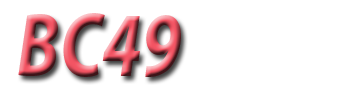
<style>
.page{position:relative;width:350px;height:100px;background:#ffffff}
.page>*{position:absolute;margin:0}
.t1{font:92px "MyriadPro-BoldIt";scale:0.79 1}
</style>
<div class="page">
<p class="t1" style="left:18px;top:13px;width:163px;height:64px">BC49</p>
</div>
